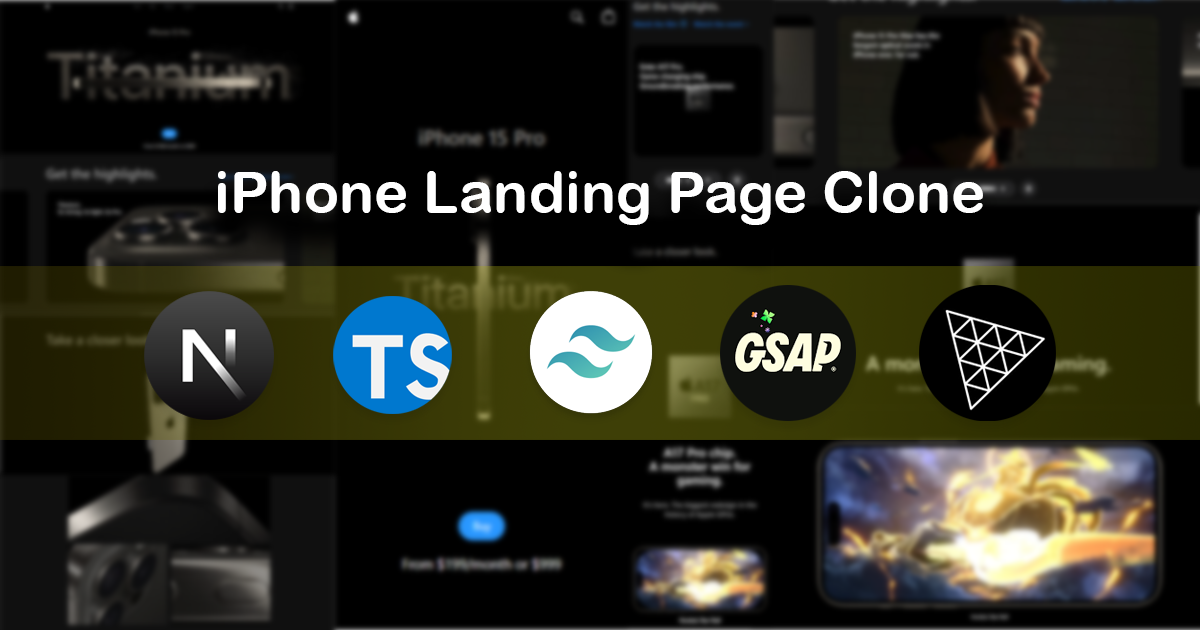
<style>
.page{position:relative;width:1200px;height:630px;background:#000000}
.page>*{position:absolute;margin:0}
.t1{font:58.3px "ArialRoundedMTBold";color:#ffffff}
</style>
<div class="page">
<p class="t1" style="left:218px;top:171px;width:765px;height:54px">iPhone Landing Page Clone</p>
</div>
